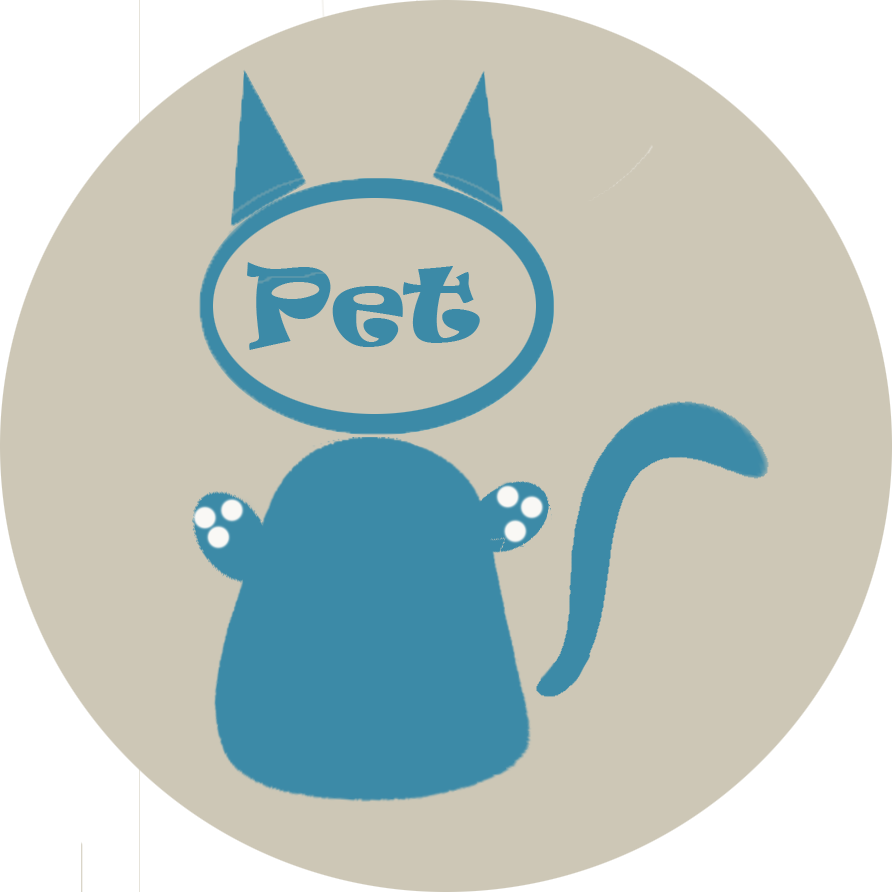
<style>
.page{position:relative;width:892px;height:892px;background:#cdc7b6}
.page>*{position:absolute;margin:0}
.t1{font:100px "Ravie";color:#3c8aa7}
</style>
<div class="page">
<p class="t1" style="left:247px;top:262px;width:233px;height:88px">Pet</p>
</div>
